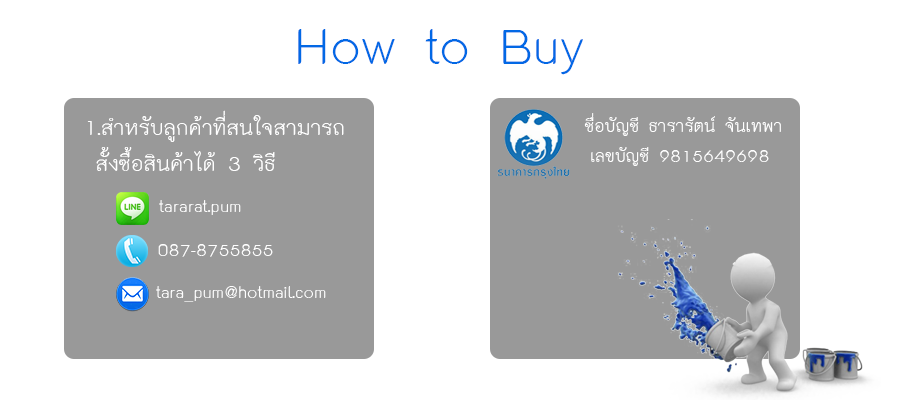
<style>
.page{position:relative;width:900px;height:400px;background:#ffffff}
.page>*{position:absolute;margin:0}
.t1{font:72px "THK2DJuly8";color:#0268e5}
.t2{font:30px "THK2DJuly8";color:#ffffff}
.t3{font:24px "THK2DJuly8";color:#ffffff}
</style>
<div class="page">
<p class="t1" style="left:298px;top:29px;width:285px;height:46px">How to Buy</p>
<p class="t2" style="left:87px;top:110px;width:257px;height:61px">1.สำหรับลูกค้าที่สนใจสามารถ<br> สั้งซื้อสินค้าได้ 3 วิธี</p>
<p class="t3" style="left:584px;top:113px;width:197px;height:23px">ชื่อบัญชี ธารารัตน์ จันเทพา</p>
<p class="t3" style="left:591px;top:147px;width:178px;height:19px">เลขบัญชี 9815649698</p>
<p class="t3" style="left:159px;top:200px;width:82px;height:15px">tararat.pum</p>
<p class="t3" style="left:158px;top:244px;width:115px;height:13px">087-8755855</p>
<p class="t3" style="left:156px;top:286px;width:170px;height:16px">tara_pum@hotmail.com</p>
</div>
